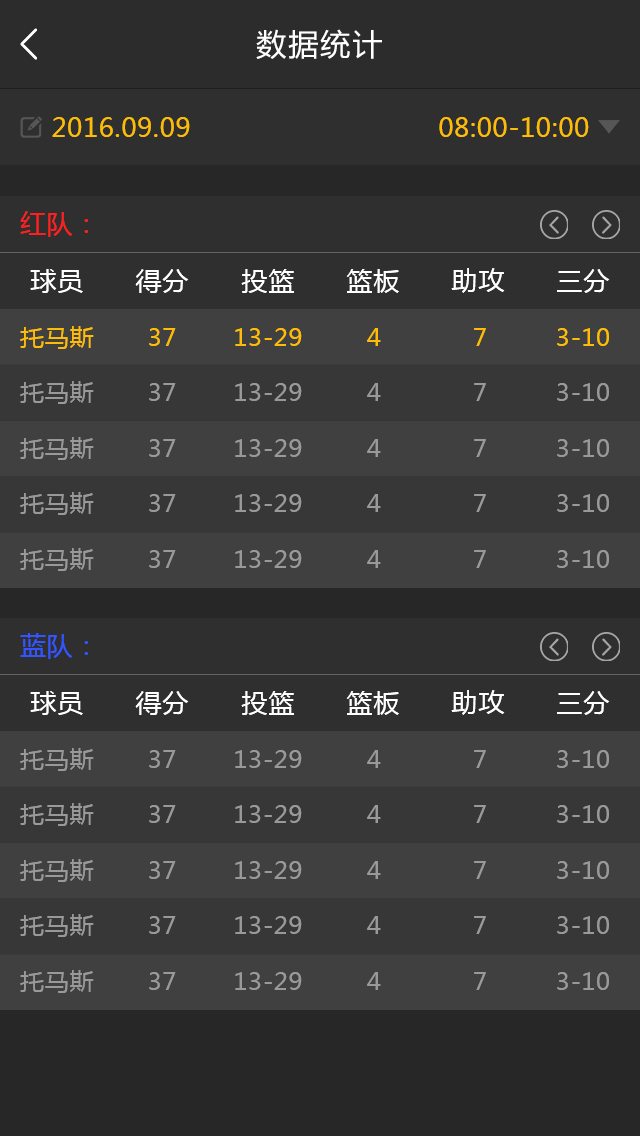
<style>
.page{position:relative;width:640px;height:1136px;background:#404040}
.page>*{position:absolute;margin:0}
.t1{font:30px "MicrosoftYaHei";letter-spacing:0.07em;color:#ffffff}
.t2{font:26px "MicrosoftYaHei";letter-spacing:0.03em;color:#fdbd06}
.t3{font:26px "MicrosoftYaHei";letter-spacing:0.03em;color:#fe2020}
.t4{font:26px "MicrosoftYaHei";letter-spacing:0.03em;color:#ffffff}
.t5{font:24px "MicrosoftYaHei";letter-spacing:0.03em;color:#fdbd06}
.t6{font:24px "MicrosoftYaHei";letter-spacing:0.03em;color:#999999}
.t7{font:26px "MicrosoftYaHei";letter-spacing:0.03em;color:#3355ff}
</style>
<div class="page">
<p class="t1" style="left:256px;top:29px;width:126px;height:30px">数据统计</p>
<p class="t2" style="left:52px;top:117px;width:138px;height:20px">2016.09.09</p>
<p class="t2" style="left:439px;top:117px;width:150px;height:20px">08:00-10:00</p>
<p class="t3" style="left:20px;top:211px;width:68px;height:26px">红队：</p>
<p class="t4" style="left:30px;top:269px;width:53px;height:24px">球员</p>
<p class="t4" style="left:135px;top:269px;width:54px;height:24px">得分</p>
<p class="t4" style="left:241px;top:269px;width:53px;height:24px">投篮</p>
<p class="t4" style="left:346px;top:269px;width:53px;height:24px">篮板</p>
<p class="t4" style="left:451px;top:268px;width:54px;height:25px">助攻</p>
<p class="t4" style="left:557px;top:269px;width:53px;height:24px">三分</p>
<p class="t5" style="left:20px;top:326px;width:74px;height:23px">托马斯</p>
<p class="t5" style="left:149px;top:328px;width:27px;height:18px">37</p>
<p class="t5" style="left:235px;top:328px;width:67px;height:18px">13-29</p>
<p class="t5" style="left:367px;top:328px;width:14px;height:18px">4</p>
<p class="t5" style="left:474px;top:328px;width:12px;height:18px">7</p>
<p class="t5" style="left:557px;top:328px;width:52px;height:18px">3-10</p>
<p class="t6" style="left:20px;top:381px;width:74px;height:23px">托马斯</p>
<p class="t6" style="left:149px;top:383px;width:27px;height:18px">37</p>
<p class="t6" style="left:235px;top:383px;width:67px;height:18px">13-29</p>
<p class="t6" style="left:367px;top:383px;width:14px;height:18px">4</p>
<p class="t6" style="left:474px;top:383px;width:12px;height:18px">7</p>
<p class="t6" style="left:557px;top:383px;width:52px;height:18px">3-10</p>
<p class="t6" style="left:20px;top:437px;width:74px;height:23px">托马斯</p>
<p class="t6" style="left:149px;top:439px;width:27px;height:18px">37</p>
<p class="t6" style="left:235px;top:439px;width:67px;height:18px">13-29</p>
<p class="t6" style="left:367px;top:439px;width:14px;height:18px">4</p>
<p class="t6" style="left:474px;top:439px;width:12px;height:18px">7</p>
<p class="t6" style="left:557px;top:439px;width:52px;height:18px">3-10</p>
<p class="t6" style="left:20px;top:492px;width:74px;height:23px">托马斯</p>
<p class="t6" style="left:149px;top:494px;width:27px;height:18px">37</p>
<p class="t6" style="left:235px;top:494px;width:67px;height:18px">13-29</p>
<p class="t6" style="left:367px;top:494px;width:14px;height:18px">4</p>
<p class="t6" style="left:474px;top:494px;width:12px;height:18px">7</p>
<p class="t6" style="left:557px;top:494px;width:52px;height:18px">3-10</p>
<p class="t6" style="left:20px;top:548px;width:74px;height:23px">托马斯</p>
<p class="t6" style="left:149px;top:550px;width:27px;height:18px">37</p>
<p class="t6" style="left:235px;top:550px;width:67px;height:18px">13-29</p>
<p class="t6" style="left:367px;top:550px;width:14px;height:18px">4</p>
<p class="t6" style="left:474px;top:550px;width:12px;height:18px">7</p>
<p class="t6" style="left:557px;top:550px;width:52px;height:18px">3-10</p>
<p class="t7" style="left:20px;top:633px;width:68px;height:26px">蓝队：</p>
<p class="t4" style="left:30px;top:691px;width:53px;height:24px">球员</p>
<p class="t4" style="left:135px;top:691px;width:54px;height:24px">得分</p>
<p class="t4" style="left:241px;top:691px;width:53px;height:24px">投篮</p>
<p class="t4" style="left:346px;top:691px;width:53px;height:24px">篮板</p>
<p class="t4" style="left:451px;top:690px;width:54px;height:25px">助攻</p>
<p class="t4" style="left:557px;top:691px;width:53px;height:24px">三分</p>
<p class="t6" style="left:20px;top:748px;width:74px;height:23px">托马斯</p>
<p class="t6" style="left:149px;top:750px;width:27px;height:18px">37</p>
<p class="t6" style="left:235px;top:750px;width:67px;height:18px">13-29</p>
<p class="t6" style="left:367px;top:750px;width:14px;height:18px">4</p>
<p class="t6" style="left:474px;top:750px;width:12px;height:18px">7</p>
<p class="t6" style="left:557px;top:750px;width:52px;height:18px">3-10</p>
<p class="t6" style="left:20px;top:803px;width:74px;height:23px">托马斯</p>
<p class="t6" style="left:149px;top:805px;width:27px;height:18px">37</p>
<p class="t6" style="left:235px;top:805px;width:67px;height:18px">13-29</p>
<p class="t6" style="left:367px;top:805px;width:14px;height:18px">4</p>
<p class="t6" style="left:474px;top:805px;width:12px;height:18px">7</p>
<p class="t6" style="left:557px;top:805px;width:52px;height:18px">3-10</p>
<p class="t6" style="left:20px;top:859px;width:74px;height:23px">托马斯</p>
<p class="t6" style="left:149px;top:861px;width:27px;height:18px">37</p>
<p class="t6" style="left:235px;top:861px;width:67px;height:18px">13-29</p>
<p class="t6" style="left:367px;top:861px;width:14px;height:18px">4</p>
<p class="t6" style="left:474px;top:861px;width:12px;height:18px">7</p>
<p class="t6" style="left:557px;top:861px;width:52px;height:18px">3-10</p>
<p class="t6" style="left:20px;top:914px;width:74px;height:23px">托马斯</p>
<p class="t6" style="left:149px;top:916px;width:27px;height:18px">37</p>
<p class="t6" style="left:235px;top:916px;width:67px;height:18px">13-29</p>
<p class="t6" style="left:367px;top:916px;width:14px;height:18px">4</p>
<p class="t6" style="left:474px;top:916px;width:12px;height:18px">7</p>
<p class="t6" style="left:557px;top:916px;width:52px;height:18px">3-10</p>
<p class="t6" style="left:20px;top:970px;width:74px;height:23px">托马斯</p>
<p class="t6" style="left:149px;top:972px;width:27px;height:18px">37</p>
<p class="t6" style="left:235px;top:972px;width:67px;height:18px">13-29</p>
<p class="t6" style="left:367px;top:972px;width:14px;height:18px">4</p>
<p class="t6" style="left:474px;top:972px;width:12px;height:18px">7</p>
<p class="t6" style="left:557px;top:972px;width:52px;height:18px">3-10</p>
</div>
